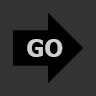
<style>
.page{position:relative;width:96px;height:96px;background:#333333}
.page>*{position:absolute;margin:0}
.t1{font:24px "Tahoma-Bold";color:#cecece}
</style>
<div class="page">
<p class="t1" style="left:27px;top:39px;width:36px;height:18px">GO</p>
</div>
